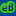
<style>
.page{position:relative;width:16px;height:16px;background:#014693}
.page>*{position:absolute;margin:0}
.t1{font:11.4px "MyriadPro-Regular"}
</style>
<div class="page">
<p class="t1" style="left:2px;top:3px;width:12px;height:8px">eB</p>
</div>
